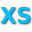
<style>
.page{position:relative;width:32px;height:32px;background:#fbfbfb}
.page>*{position:absolute;margin:0}
.t1{font:21.9px "DejaVuSans-Bold";color:#00c0ff;scale:0.96 1}
</style>
<div class="page">
<p class="t1" style="left:0px;top:6px;width:30px;height:18px">XS</p>
</div>
